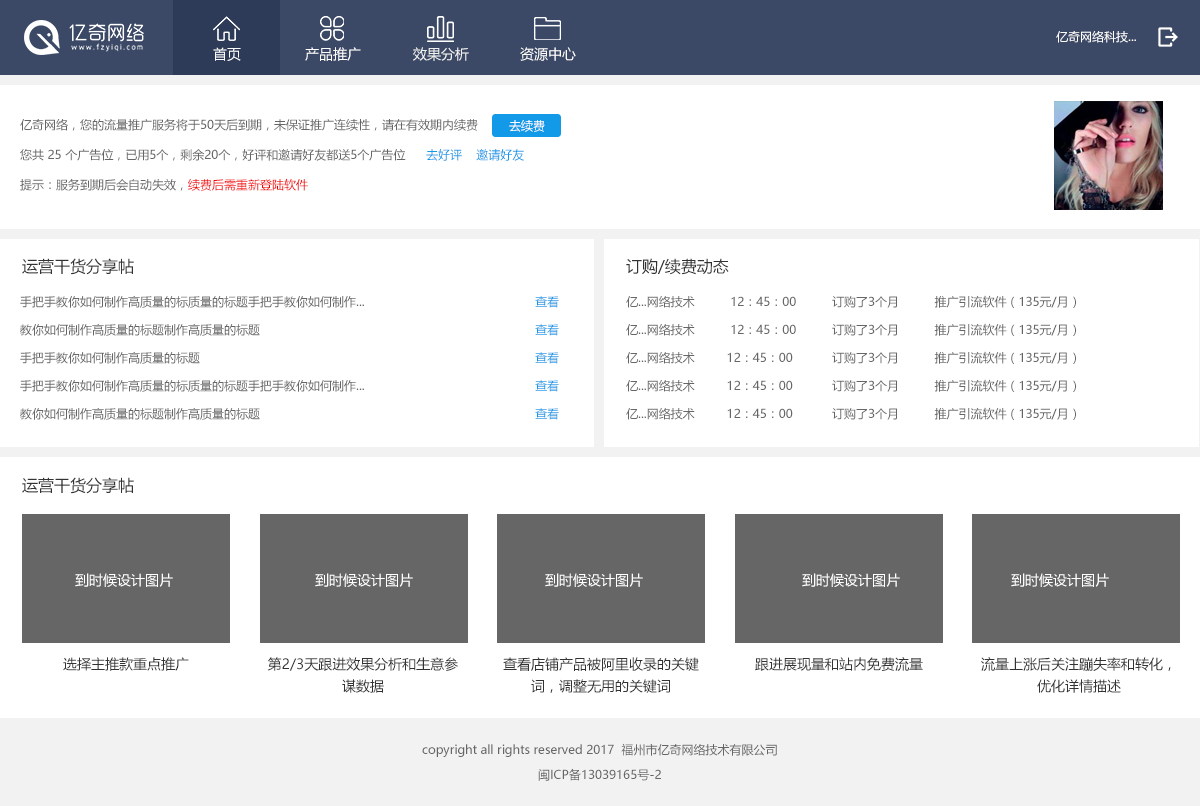
<style>
.page{position:relative;width:1200px;height:806px;background:#ffffff}
.page>*{position:absolute;margin:0}
.t1{font:12px "MicrosoftYaHei";color:#ffffff}
.t2{font:14px "MicrosoftYaHei";color:#ffffff}
.t3{font:14px "MicrosoftYaHei";color:#f2f2f2}
.t4{font:12px/30px "MicrosoftYaHei";color:#666666}
.t5{font:12px/30px "MicrosoftYaHei";color:#f30000}
.t6{font:12px "MicrosoftYaHei";color:#1299e7}
.t7{font:16px "MicrosoftYaHei";color:#333333}
.t8{font:12px/28px "MicrosoftYaHei";color:#666666}
.t9{font:12px/28px "MicrosoftYaHei";color:#1299e7}
.t10{font:14px "MicrosoftYaHei";color:#333333}
.t11{font:14px/22px "MicrosoftYaHei";color:#333333}
.t12{font:12px "MicrosoftYaHei";color:#666666}
</style>
<div class="page">
<p class="t1" style="left:1056px;top:31px;width:80px;height:12px">亿奇网络科技...</p>
<p class="t2" style="left:213px;top:47px;width:28px;height:14px">首页</p>
<p class="t2" style="left:305px;top:47px;width:56px;height:14px">产品推广</p>
<p class="t3" style="left:413px;top:47px;width:56px;height:14px">效果分析</p>
<p class="t2" style="left:520px;top:47px;width:56px;height:14px">资源中心</p>
<p class="t4" style="left:20px;top:118px;width:458px;height:73px;text-align:justify">亿奇网络，您的流量推广服务将于50天后到期，未保证推广连续性，请在有效期内续费<br>您共 25 个广告位，已用5个，剩余20个，好评和邀请好友都送5个广告位<br>提示：服务到期后会自动失效，<span class="t5">续费后需重新登陆软件</span></p>
<p class="t1" style="left:509px;top:120px;width:36px;height:12px">去续费</p>
<p class="t6" style="left:426px;top:149px;width:98px;height:12px">去好评    邀请好友</p>
<p class="t7" style="left:22px;top:258px;width:112px;height:17px">运营干货分享帖</p>
<p class="t7" style="left:626px;top:258px;width:103px;height:17px">订购/续费动态</p>
<p class="t8" style="left:20px;top:295px;width:344px;height:125px;text-align:justify">手把手教你如何制作高质量的标质量的标题手把手教你如何制作...<br>教你如何制作高质量的标题制作高质量的标题<br>手把手教你如何制作高质量的标题<br>手把手教你如何制作高质量的标质量的标题手把手教你如何制作...<br>教你如何制作高质量的标题制作高质量的标题</p>
<p class="t9" style="left:535px;top:296px;width:24px;height:124px;text-align:justify">查看<br>查看<br>查看<br>查看<br>查看</p>
<p class="t8" style="left:626px;top:295px;width:450px;height:125px;text-align:justify">亿...网络技术          12：45：00          订购了3个月          推广引流软件（135元/月）<br>亿...网络技术          12：45：00          订购了3个月          推广引流软件（135元/月）<br>亿...网络技术         12：45：00           订购了3个月          推广引流软件（135元/月）<br>亿...网络技术         12：45：00           订购了3个月          推广引流软件（135元/月）<br>亿...网络技术         12：45：00           订购了3个月          推广引流软件（135元/月）</p>
<p class="t7" style="left:22px;top:477px;width:112px;height:17px">运营干货分享帖</p>
<p class="t2" style="left:75px;top:573px;width:98px;height:14px">到时候设计图片</p>
<p class="t2" style="left:315px;top:573px;width:98px;height:14px">到时候设计图片</p>
<p class="t2" style="left:545px;top:573px;width:98px;height:14px">到时候设计图片</p>
<p class="t2" style="left:802px;top:573px;width:98px;height:14px">到时候设计图片</p>
<p class="t2" style="left:1011px;top:573px;width:98px;height:14px">到时候设计图片</p>
<p class="t10" style="left:63px;top:657px;width:126px;height:14px">选择主推款重点推广</p>
<p class="t11" style="left:267px;top:657px;width:191px;height:36px;text-align:center">第2/3天跟进效果分析和生意参<br>谋数据</p>
<p class="t11" style="left:503px;top:657px;width:196px;height:36px;text-align:center">查看店铺产品被阿里收录的关键<br>词，调整无用的关键词</p>
<p class="t10" style="left:755px;top:657px;width:168px;height:14px">跟进展现量和站内免费流量</p>
<p class="t11" style="left:981px;top:657px;width:190px;height:36px;text-align:center">流量上涨后关注蹦失率和转化，<br>优化详情描述</p>
<p class="t12" style="left:422px;top:743px;width:355px;height:14px">copyright all rights reserved 2017  福州市亿奇网络技术有限公司</p>
<p class="t12" style="left:538px;top:768px;width:123px;height:13px">闽ICP备13039165号-2</p>
</div>
